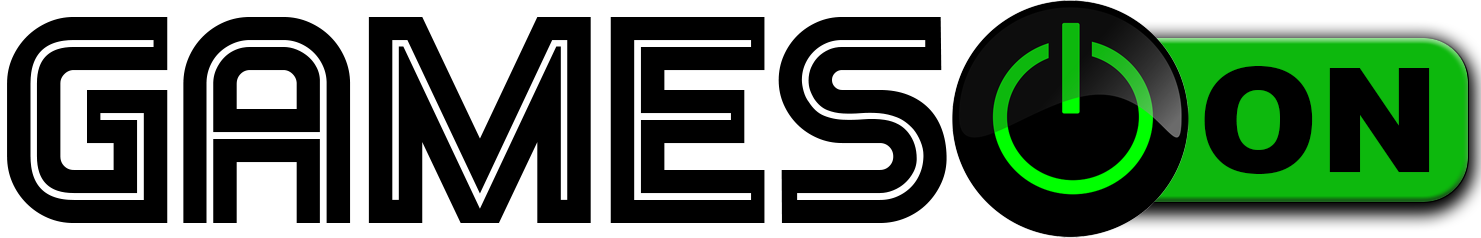
<style>
.page{position:relative;width:1481px;height:238px;background:#000000}
.page>*{position:absolute;margin:0}
.t1{font:295.6px "Games-Regular";color:#000000}
.t2{font:145px "Arial-Black";color:#000000}
</style>
<div class="page">
<p class="t1" style="left:7px;top:17px;width:940px;height:206px">Games</p>
<p class="t2" style="left:1204px;top:66px;width:226px;height:108px">ON</p>
</div>
